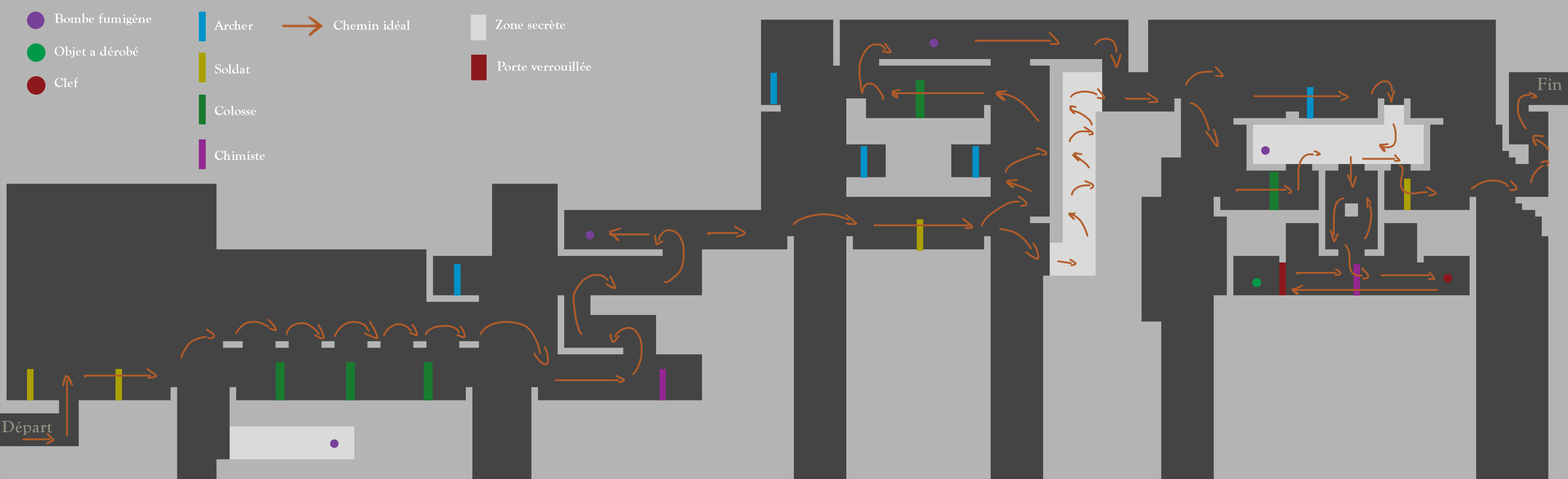
<style>
.page{position:relative;width:1568px;height:479px;background:#b4b4b4}
.page>*{position:absolute;margin:0}
.t1{font:13.7px "GoudyOldStyleT-Bold";color:#ffffff}
.t2{font:18px "GoudyOldStyleT-Bold";color:#8d8c80}
.t3{font:17.1px "GoudyOldStyleT-Bold";color:#8d8c80}
</style>
<div class="page">
<p class="t1" style="left:54px;top:13px;width:97px;height:12px">Bombe fumigène</p>
<p class="t1" style="left:214px;top:20px;width:39px;height:10px">Archer</p>
<p class="t1" style="left:334px;top:20px;width:76px;height:10px">Chemin idéal</p>
<p class="t1" style="left:496px;top:20px;width:69px;height:9px">Zone secrète</p>
<p class="t1" style="left:55px;top:46px;width:83px;height:12px">Objet a dérobé</p>
<p class="t1" style="left:215px;top:64px;width:35px;height:9px">Soldat</p>
<p class="t1" style="left:497px;top:61px;width:94px;height:10px">Porte verrouillée</p>
<p class="t1" style="left:55px;top:78px;width:23px;height:9px">Clef</p>
<p class="t2" style="left:1537px;top:78px;width:25px;height:12px">Fin</p>
<p class="t1" style="left:215px;top:106px;width:41px;height:9px">Colosse</p>
<p class="t1" style="left:215px;top:150px;width:50px;height:10px">Chimiste</p>
<p class="t3" style="left:2px;top:421px;width:50px;height:14px">Départ</p>
</div>
